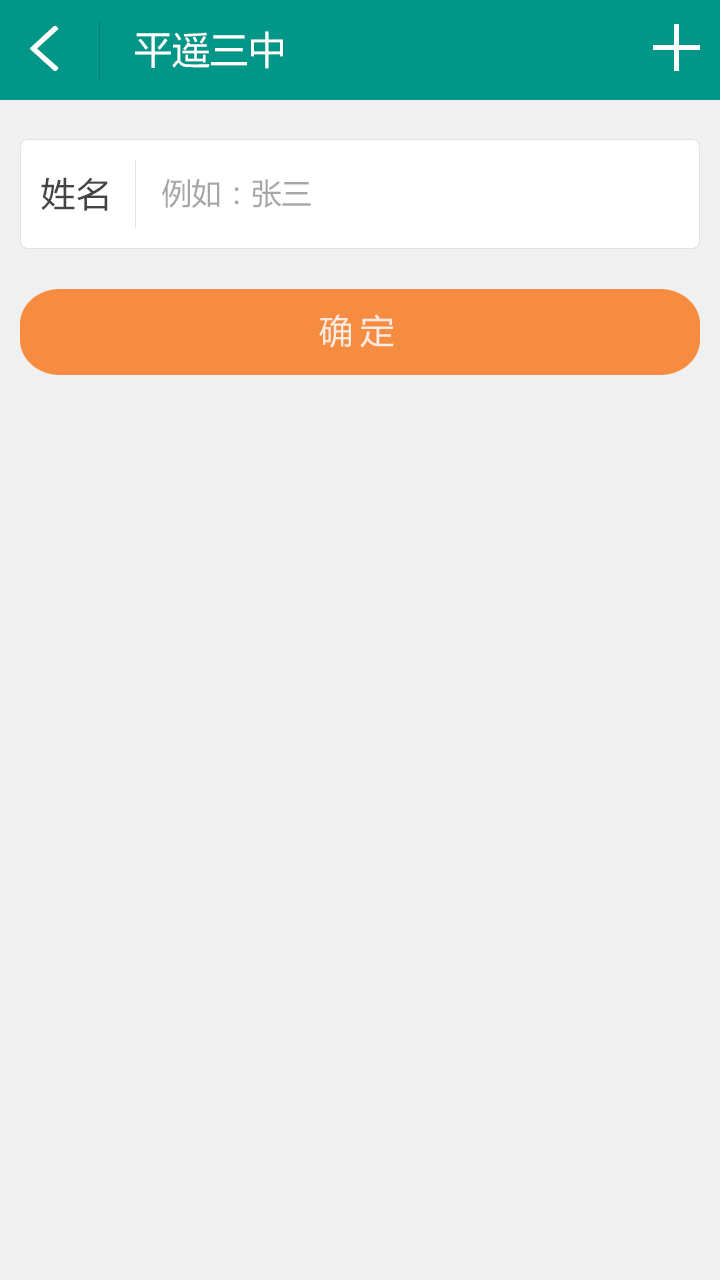
<style>
.page{position:relative;width:720px;height:1280px;background:#f0f0f0}
.page>*{position:absolute;margin:0}
.t1{font:62px "SimHei";color:#ffffff;font-weight:bold}
.t2{font:38px "MicrosoftYaHei";color:#ffffff}
.t3{font:34px "MicrosoftYaHei";letter-spacing:0.05em;color:#444444}
.t4{font:30px "MicrosoftYaHei";color:#a6a6a6}
.t5{font:34px "MicrosoftYaHei";letter-spacing:0.2em;color:#fdebe2}
</style>
<div class="page">
<p class="t1" style="left:30px;top:26px;width:29px;height:45px">&lt;</p>
<p class="t2" style="left:135px;top:31px;width:148px;height:38px">平遥三中</p>
<p class="t3" style="left:41px;top:177px;width:67px;height:34px">姓名</p>
<p class="t4" style="left:162px;top:179px;width:149px;height:29px">例如：张三</p>
<p class="t5" style="left:319px;top:314px;width:75px;height:34px">确定</p>
</div>
